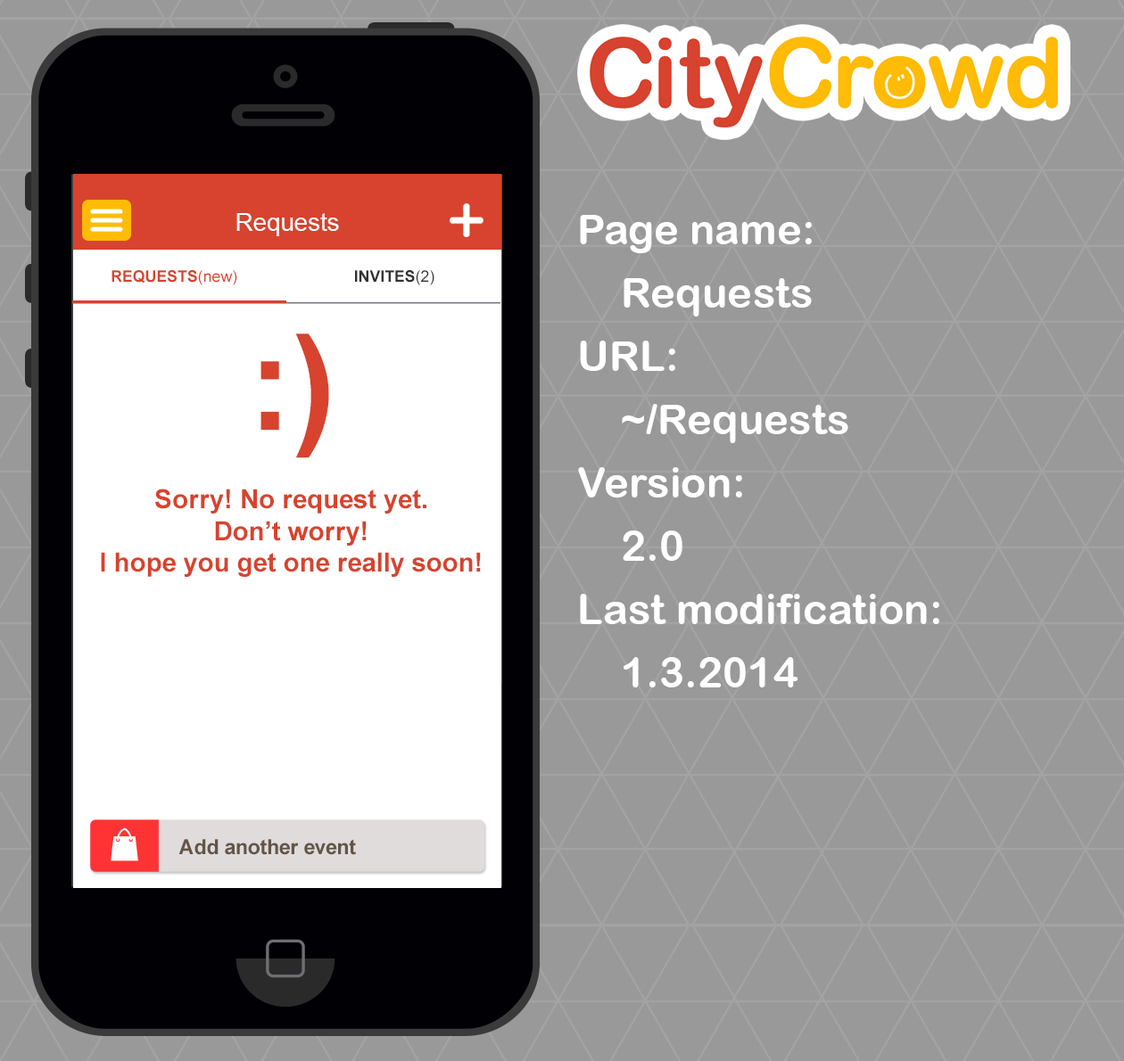
<style>
.page{position:relative;width:1124px;height:1061px;background:#999999}
.page>*{position:absolute;margin:0}
.t1{font:24.6px "ArialMT";color:#ffffff}
.t2{font:42.2px/63.3px "ArialRoundedMTBold";color:#ffffff}
.t3{font:15.8px "Arial-BoldMT";color:#d7432e;text-transform:uppercase}
.t4{font:15.8px "ArialMT";color:#d7432e;text-transform:uppercase}
.t5{font:15.8px "ArialMT";color:#d7432e}
.t6{font:15.8px "Arial-BoldMT";color:#333333;text-transform:uppercase}
.t7{font:15.8px "ArialMT";color:#333333;text-transform:uppercase}
.t8{font:26.4px "Arial-BoldMT";color:#d7432e}
.t9{font:131.9px/79.1px "Arial-BoldMT";color:#d7432e}
.t10{font:26.4px/79.1px "Arial-BoldMT";color:#d7432e}
.t11{font:20.8px "Arial-BoldMT";color:#625548}
</style>
<div class="page">
<p class="t1" style="left:236px;top:213px;width:103px;height:23px">Requests</p>
<p class="t2" style="left:578px;top:215px;width:361px;height:473px">Page name:<br>Requests<br>URL:<br>~/Requests<br>Version:<br>2.0<br>Last modification:<br>1.3.2014</p>
<p class="t3" style="left:111px;top:270px;width:126px;height:15px">REQUESTS<span class="t4">(</span><span class="t5">new</span><span class="t4">)</span></p>
<p class="t6" style="left:355px;top:270px;width:79px;height:15px">INVITES<span class="t7">(2)</span></p>
<p class="t8" style="left:101px;top:334px;width:380px;height:243px;text-align:center"><span class="t9">:)<br></span><span class="t10">Sorry! No request yet.<br></span>Don’t worry!<br>I hope you get one really soon!</p>
<p class="t11" style="left:178px;top:839px;width:178px;height:16px">Add another event</p>
</div>
